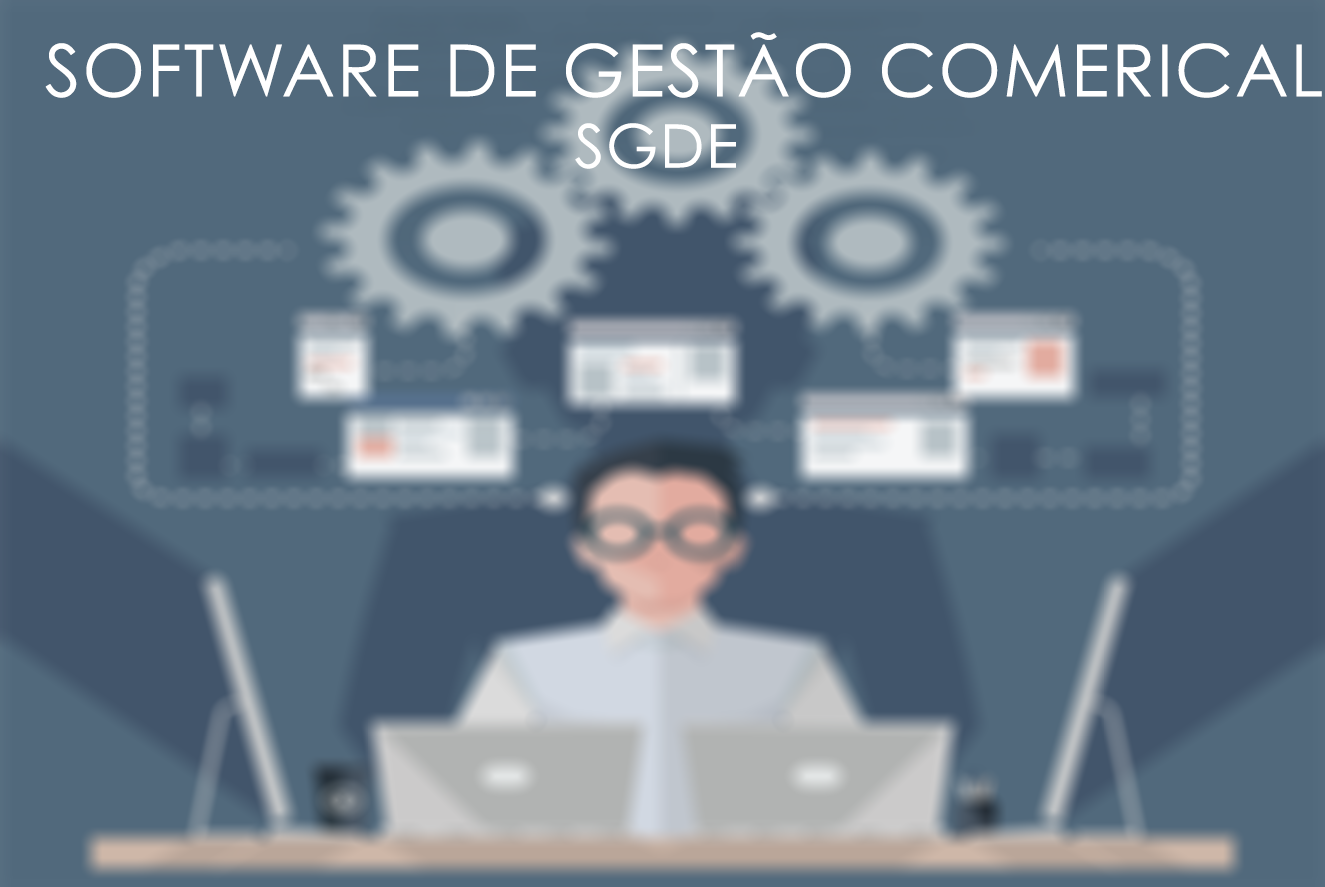
<style>
.page{position:relative;width:1325px;height:887px;background:#51697c}
.page>*{position:absolute;margin:0}
.t1{font:72px "CenturyGothic";letter-spacing:0.025em;color:#ffffff}
.t2{font:60px "CenturyGothic";letter-spacing:0.025em;color:#ffffff}
</style>
<div class="page">
<p class="t1" style="left:45px;top:32px;width:1277px;height:66px">SOFTWARE DE GESTÃO COMERICAL</p>
<p class="t2" style="left:575px;top:123px;width:161px;height:46px">SGDE</p>
</div>
